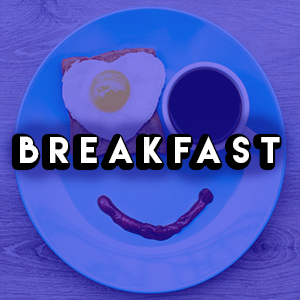
<style>
.page{position:relative;width:300px;height:300px}
.page>*{position:absolute;margin:0}
.t1{font:33.3px "LemonMilk";letter-spacing:0.3em;color:#ffffff}
</style>
<div class="page">
<p class="t1" style="left:20px;top:136px;width:260px;height:27px">BreaKFAST</p>
</div>
